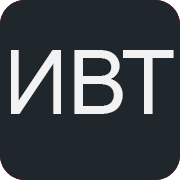
<style>
.page{position:relative;width:180px;height:180px;background:#1f262c}
.page>*{position:absolute;margin:0}
.t1{font:88.8px "ArialMT";color:#f2f2f2}
</style>
<div class="page">
<p class="t1" style="left:11px;top:50px;width:163px;height:64px">ИВТ</p>
</div>
